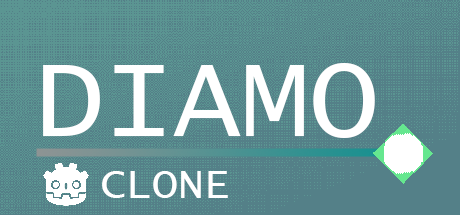
<style>
.page{position:relative;width:460px;height:215px;background:#548088}
.page>*{position:absolute;margin:0}
.t1{font:113.5px "LucidaConsole";color:#ffffff}
.t2{font:43px "LucidaConsole";color:#ffffff}
</style>
<div class="page">
<p class="t1" style="left:43px;top:63px;width:332px;height:75px">DIAMO</p>
<p class="t2" style="left:102px;top:171px;width:126px;height:27px">CLONE</p>
</div>
